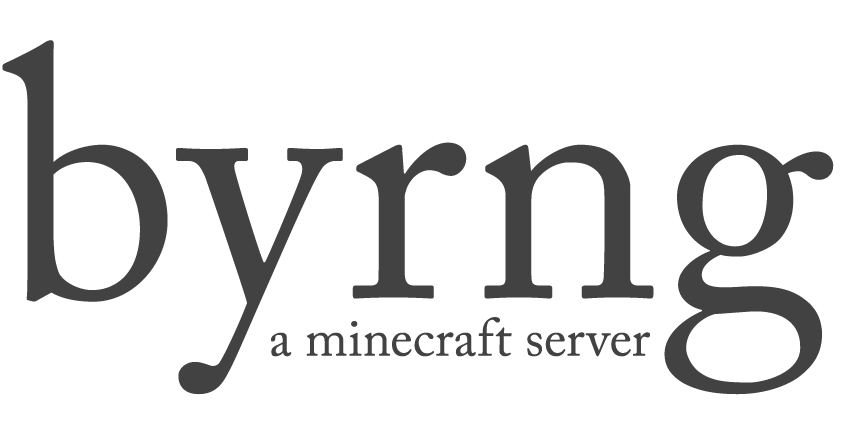
<style>
.page{position:relative;width:842px;height:430px;background:#ffffff}
.page>*{position:absolute;margin:0}
.t1{font:609.5px "ACaslonPro-Regular";color:#424242}
.t2{font:90.9px "ACaslonPro-Regular";color:#424242}
</style>
<div class="page">
<p class="t1" style="left:2px;top:40px;width:832px;height:355px">byrng</p>
<p class="t2" style="left:271px;top:317px;width:379px;height:40px">a minecraft server</p>
</div>
